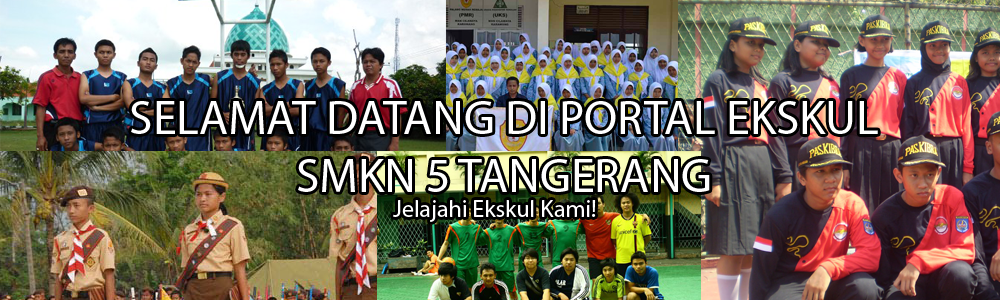
<style>
.page{position:relative;width:1000px;height:300px}
.page>*{position:absolute;margin:0}
.t1{font:48px "MyriadPro-Regular";color:#ffffff}
.t2{font:24px "MyriadPro-Regular";color:#ffffff}
</style>
<div class="page">
<p class="t1" style="left:131px;top:101px;width:747px;height:91px;text-align:center">SELAMAT DATANG DI PORTAL EKSKUL <br>SMKN 5 TANGERANG</p>
<p class="t2" style="left:393px;top:200px;width:203px;height:22px">Jelajahi Ekskul Kami!</p>
</div>
